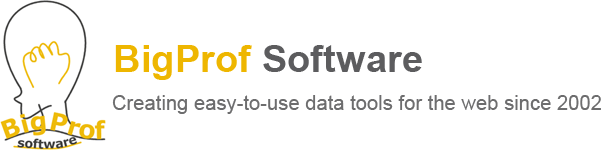
<style>
.page{position:relative;width:604px;height:150px;background:#ffffff}
.page>*{position:absolute;margin:0}
.t1{font:38.2px "Arial-BoldMT";color:#5c5c5e}
.t2{font:38.2px "Arial-BoldMT";color:#eeb600}
.t3{font:20.2px "ArialMT";color:#6d6d6e}
</style>
<div class="page">
<p class="t1" style="left:115px;top:45px;width:307px;height:35px"><span class="t2">BigProf</span> Software</p>
<p class="t3" style="left:112px;top:95px;width:489px;height:19px">Creating easy-to-use data tools for the web since 2002</p>
</div>
